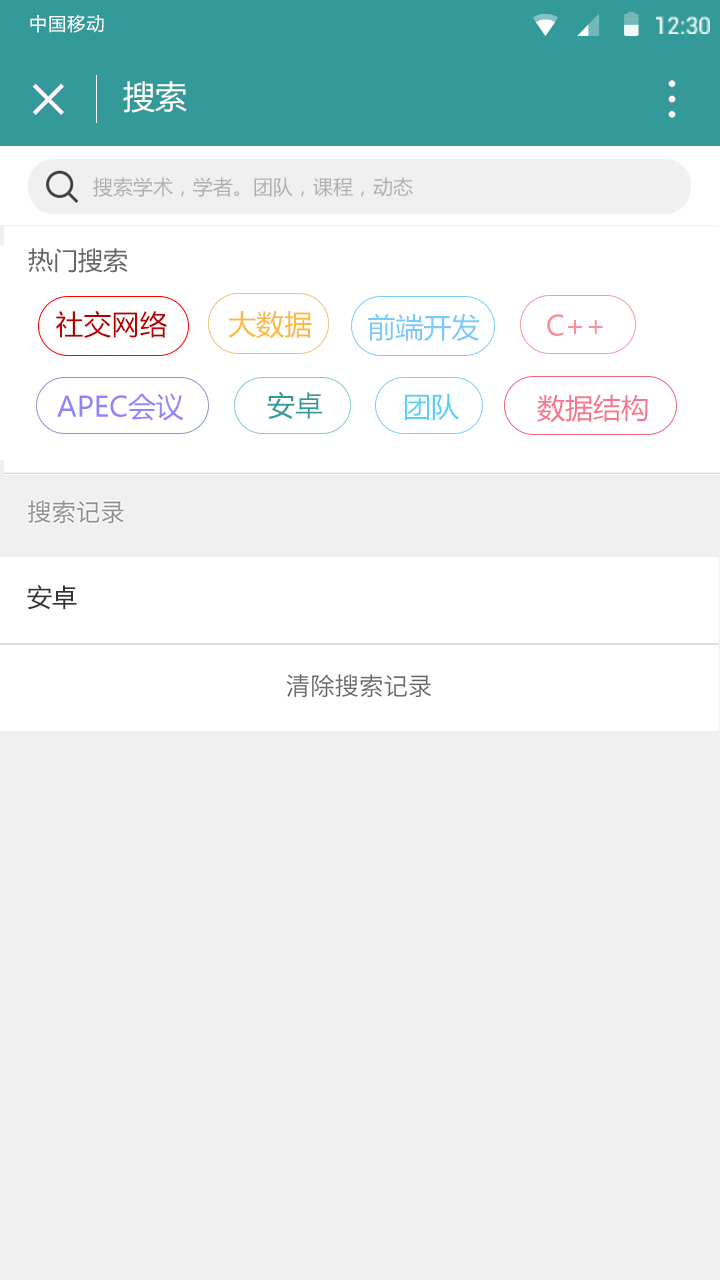
<style>
.page{position:relative;width:720px;height:1280px;background:#f0f0f0}
.page>*{position:absolute;margin:0}
.t1{font:17.9px "MicrosoftYaHei";letter-spacing:0.065em;color:#ffffff}
.t2{font:32px "MicrosoftYaHei";color:#fefdf8}
.t3{font:19.8px "MicrosoftYaHei";color:#afafaf}
.t4{font:25px "MicrosoftYaHei";color:#666666}
.t5{font:28px "MicrosoftYaHei";color:#b60000}
.t6{font:28px "MicrosoftYaHei";color:#faba40}
.t7{font:28px "MicrosoftYaHei";color:#7bc9fb}
.t8{font:28px "MicrosoftYaHei";color:#fb8e9d}
.t9{font:28px "MicrosoftYaHei";color:#9084fe}
.t10{font:28px "MicrosoftYaHei";color:#339999}
.t11{font:27.9px "MicrosoftYaHei";color:#5bcff5}
.t12{font:28px "MicrosoftYaHei";color:#f57691}
.t13{font:25px "MicrosoftYaHei";color:#333333}
</style>
<div class="page">
<p class="t1" style="left:30px;top:15px;width:74px;height:18px">中国移动</p>
<p class="t2" style="left:123px;top:81px;width:64px;height:32px">搜索</p>
<p class="t3" style="left:93px;top:177px;width:320px;height:20px">搜索学术，学者。团队，课程，动态</p>
<p class="t4" style="left:28px;top:248px;width:100px;height:25px">热门搜索</p>
<p class="t5" style="left:56px;top:310px;width:111px;height:28px">社交网络</p>
<p class="t6" style="left:228px;top:311px;width:84px;height:28px">大数据</p>
<p class="t7" style="left:368px;top:313px;width:111px;height:28px">前端开发</p>
<p class="t8" style="left:547px;top:314px;width:56px;height:22px">C++</p>
<p class="t9" style="left:57px;top:393px;width:127px;height:28px">APEC会议</p>
<p class="t10" style="left:267px;top:391px;width:56px;height:28px">安卓</p>
<p class="t11" style="left:405px;top:393px;width:54px;height:28px">团队</p>
<p class="t12" style="left:537px;top:394px;width:111px;height:28px">数据结构</p>
<p class="t13" style="left:27px;top:585px;width:50px;height:25px">安卓</p>
</div>
